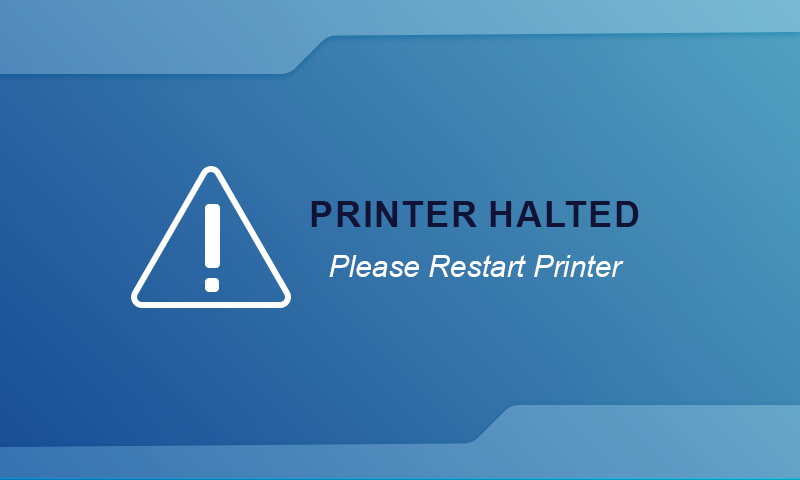
<style>
.page{position:relative;width:800px;height:480px}
.page>*{position:absolute;margin:0}
.t1{font:29.9px/50px "Arial-ItalicMT";color:#ffffff}
.t2{font:36.5px/50px "Arial-BoldMT";color:#111236;text-transform:uppercase}
</style>
<div class="page">
<p class="t1" style="left:311px;top:201px;width:328px;height:76px;text-align:center"><span class="t2">Printer Halted<br></span>Please Restart Printer</p>
</div>
